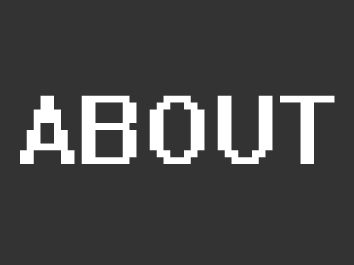
<style>
.page{position:relative;width:354px;height:265px;background:#333333}
.page>*{position:absolute;margin:0}
.t1{font:109.1px "System";color:#ffffff}
</style>
<div class="page">
<p class="t1" style="left:20px;top:95px;width:315px;height:69px">ABOUT</p>
</div>
